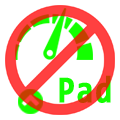
<style>
.page{position:relative;width:120px;height:120px;background:#ffffff}
.page>*{position:absolute;margin:0}
.t1{font:38px "Consolas-Bold";letter-spacing:0.05em;color:#13ff00;font-weight:bold;scale:0.8 1}
</style>
<div class="page">
<p class="t1" style="left:59px;top:75px;width:52px;height:28px">Pad</p>
</div>
